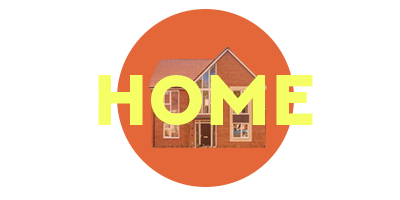
<style>
.page{position:relative;width:400px;height:200px;background:#ffffff}
.page>*{position:absolute;margin:0}
.t1{font:70.9px "NEXTART-Heavy";letter-spacing:0.03em;color:#f5ff65}
</style>
<div class="page">
<p class="t1" style="left:98px;top:75px;width:215px;height:50px">HOME</p>
</div>
